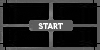
<style>
.page{position:relative;width:100px;height:50px;background:#000000}
.page>*{position:absolute;margin:0}
.t1{font:8px "Museo-700";color:#ffffff}
</style>
<div class="page">
<p class="t1" style="left:38px;top:23px;width:25px;height:6px">START</p>
</div>
